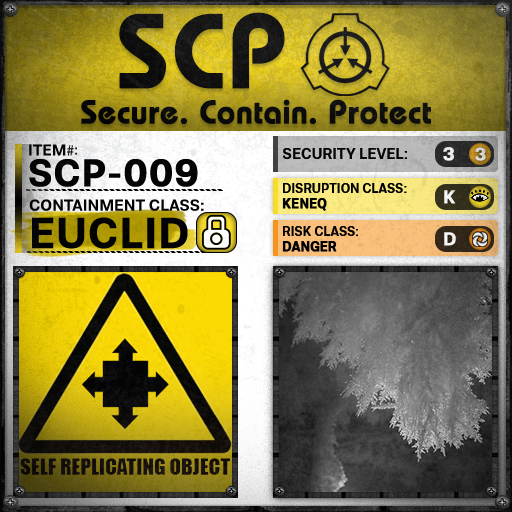
<style>
.page{position:relative;width:512px;height:512px}
.page>*{position:absolute;margin:0}
.t1{font:105.8px "BauhausLT-Demi";color:#000000;font-weight:bold}
.t2{font:33px "BauhausLT-Demi";color:#000000;font-weight:bold}
.t3{font:15.7px "Molde-Semibold";color:#000000}
.t4{font:15.7px "MyriadPro-Regular";color:#000000}
.t5{font:13.7px "Molde-Semibold";color:#000000}
.t6{font:15px "Molde-Semibold";color:#000000}
.t7{font:18.6px "Molde-Semibold";color:#ffffff;font-weight:bold}
.t8{font:17.8px "Molde-Semibold";color:#d6d7d7;font-weight:bold}
.t9{font:38.2px "Molde-Semibold";color:#000000;font-weight:bold}
.t10{font:12.8px "Molde-Semibold";color:#000000}
.t11{font:12.8px "Molde-Semibold";color:#000000;font-weight:bold}
.t12{font:15.9px "Molde-Semibold";color:#000000}
.t13{font:42.8px "Molde-Semibold";color:#000000;font-weight:bold}
</style>
<div class="page">
<p class="t1" style="left:119px;top:12px;width:166px;height:77px">SCP</p>
<p class="t2" style="left:81px;top:99px;width:350px;height:26px">Secure. Contain. Protect</p>
<p class="t3" style="left:29px;top:144px;width:45px;height:12px">ITEM<span class="t4">#</span></p>
<p class="t5" style="left:75px;top:147px;width:2px;height:8px">:</p>
<p class="t6" style="left:283px;top:148px;width:124px;height:11px">SECURITY LEVEL:</p>
<p class="t7" style="left:443px;top:147px;width:11px;height:14px">3</p>
<p class="t8" style="left:475px;top:147px;width:11px;height:14px">3</p>
<p class="t9" style="left:29px;top:159px;width:169px;height:28px">SCP-009</p>
<p class="t10" style="left:282px;top:183px;width:125px;height:28px">DISRUPTION CLASS:<br><span class="t11">KENEQ</span></p>
<p class="t7" style="left:444px;top:190px;width:12px;height:14px">K</p>
<p class="t12" style="left:29px;top:199px;width:175px;height:12px">CONTAINMENT CLASS:</p>
<p class="t13" style="left:32px;top:217px;width:156px;height:32px">EUCLID</p>
<p class="t10" style="left:282px;top:226px;width:76px;height:26px">RISK CLASS:<br><span class="t11">DANGER</span></p>
<p class="t7" style="left:444px;top:232px;width:12px;height:14px">D</p>
</div>
